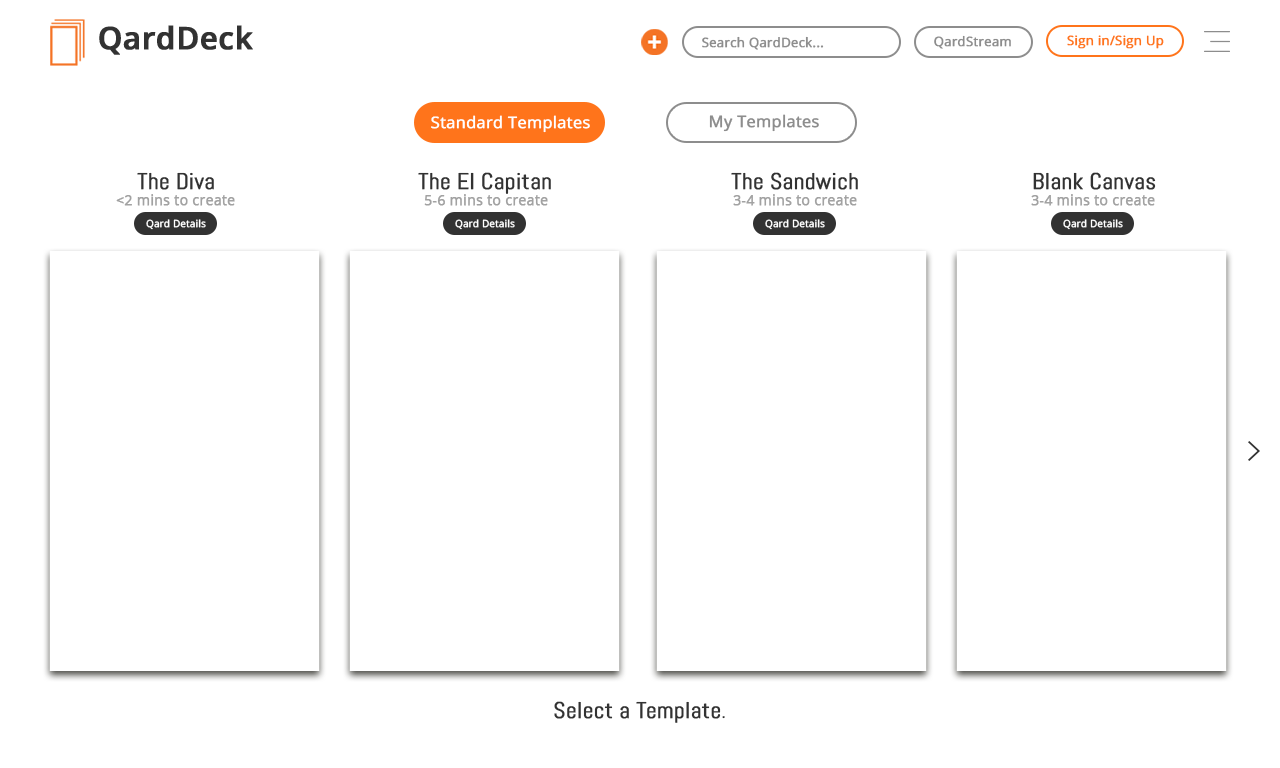
<style>
.page{position:relative;width:1280px;height:768px;background:#ffffff}
.page>*{position:absolute;margin:0}
.t1{font:30.9px "OpenSans-Semibold";color:#323232;font-weight:bold}
.t2{font:13px "OpenSans";color:#8d8d8d;font-weight:bold}
.t3{font:13px "OpenSans";color:#ff741b;font-weight:bold}
.t4{font:16px "OpenSans";color:#ffffff;font-weight:bold}
.t5{font:16px "OpenSans";color:#8d8d8d;font-weight:bold}
.t6{font:23px "Abel-Regular";color:#323232;font-weight:bold}
.t7{font:14px "OpenSans";color:#a2a2a2;font-weight:bold}
.t8{font:10px "OpenSans";color:#ffffff;font-weight:bold}
.t9{font:23px "Abel-Regular";color:#323232}
</style>
<div class="page">
<p class="t1" style="left:99px;top:25px;width:154px;height:30px">QardDeck</p>
<p class="t2" style="left:702px;top:36px;width:122px;height:14px">Search QardDeck...</p>
<p class="t2" style="left:934px;top:35px;width:77px;height:14px">QardStream</p>
<p class="t3" style="left:1067px;top:35px;width:97px;height:14px">Sign in/Sign Up</p>
<p class="t4" style="left:431px;top:115px;width:159px;height:18px">Standard Templates</p>
<p class="t5" style="left:709px;top:114px;width:110px;height:18px">My Templates</p>
<p class="t6" style="left:137px;top:172px;width:77px;height:18px">The Diva</p>
<p class="t6" style="left:418px;top:172px;width:133px;height:22px">The El Capitan</p>
<p class="t6" style="left:731px;top:172px;width:127px;height:18px">The Sandwich</p>
<p class="t6" style="left:1033px;top:172px;width:123px;height:18px">Blank Canvas</p>
<p class="t7" style="left:116px;top:194px;width:119px;height:12px">&lt;2 mins to create</p>
<p class="t7" style="left:424px;top:194px;width:124px;height:12px">5-6 mins to create</p>
<p class="t7" style="left:733px;top:194px;width:124px;height:12px">3-4 mins to create</p>
<p class="t7" style="left:1031px;top:194px;width:124px;height:12px">3-4 mins to create</p>
<p class="t8" style="left:146px;top:219px;width:60px;height:11px">Qard Details</p>
<p class="t8" style="left:455px;top:219px;width:60px;height:11px">Qard Details</p>
<p class="t8" style="left:765px;top:219px;width:60px;height:11px">Qard Details</p>
<p class="t8" style="left:1063px;top:219px;width:60px;height:11px">Qard Details</p>
<p class="t6" style="left:554px;top:701px;width:171px;height:22px">Select a Template<span class="t9">.</span></p>
</div>
